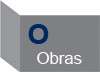
<style>
.page{position:relative;width:100px;height:72px;background:#7f8084}
.page>*{position:absolute;margin:0}
.t1{font:27.8px "Arial-BoldMT";color:#00285e}
.t2{font:16.7px "ArialMT";color:#fcfcfd}
</style>
<div class="page">
<p class="t1" style="left:28px;top:24px;width:21px;height:20px">O</p>
<p class="t2" style="left:37px;top:52px;width:45px;height:12px">Obras</p>
</div>
